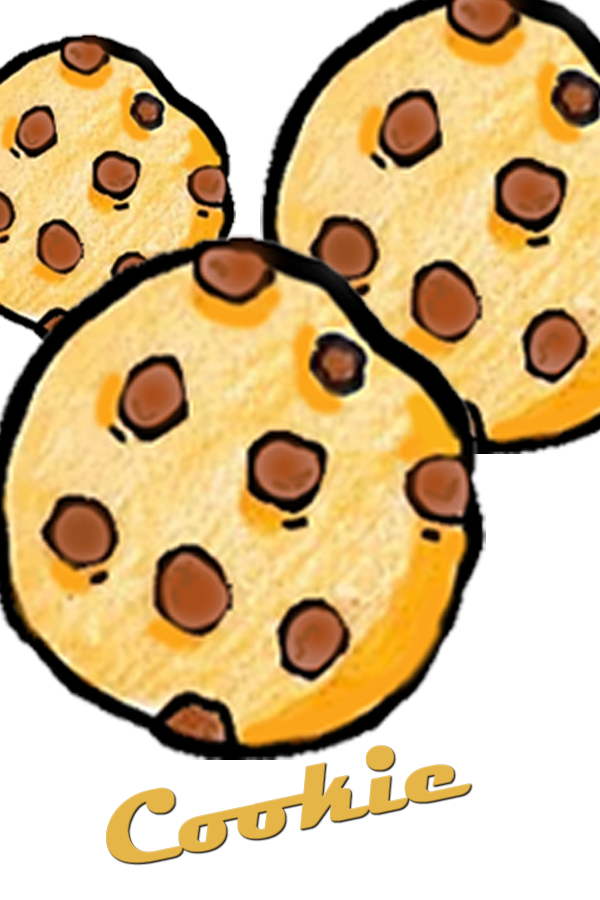
<style>
.page{position:relative;width:600px;height:900px;background:#ffffff}
.page>*{position:absolute;margin:0}
.t1{font:100px "Magneto-Bold";color:#e5b647;font-weight:bold}
</style>
<div class="page">
<p class="t1" style="left:106px;top:745px;width:365px;height:119px;rotate:-12deg">Cookie</p>
</div>
